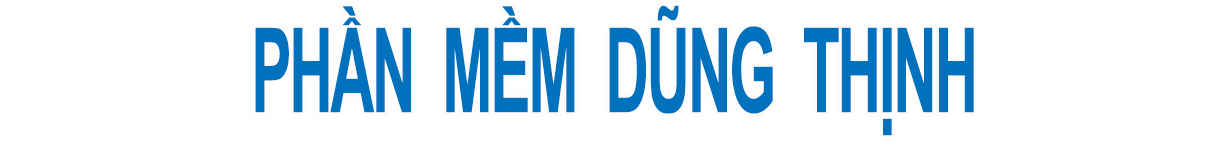
<style>
.page{position:relative;width:1228px;height:143px;background:#ffffff}
.page>*{position:absolute;margin:0}
.t1{font:117.5px "Arial-BoldMT";letter-spacing:-0.04em;color:#0071bd;scale:0.52 1}
</style>
<div class="page">
<p class="t1" style="left:255px;top:5px;width:719px;height:131px">PHẦN  MỀM  DŨNG  THỊNH</p>
</div>
